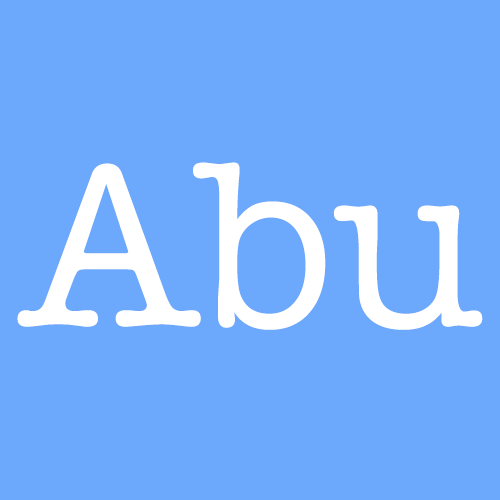
<style>
.page{position:relative;width:500px;height:500px;background:#6ca8fb}
.page>*{position:absolute;margin:0}
.t1{font:240px "AmericanTypewriter";color:#ffffff}
</style>
<div class="page">
<p class="t1" style="left:17px;top:162px;width:466px;height:168px">Abu</p>
</div>
